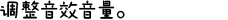
<style>
.page{position:relative;width:228px;height:20px;background:#ffffff}
.page>*{position:absolute;margin:0}
.t1{font:22px "¢è?";color:#000000}
</style>
<div class="page">
<p class="t1" style="left:0px;top:0px;width:125px;height:19px">调整音效音量。</p>
</div>
